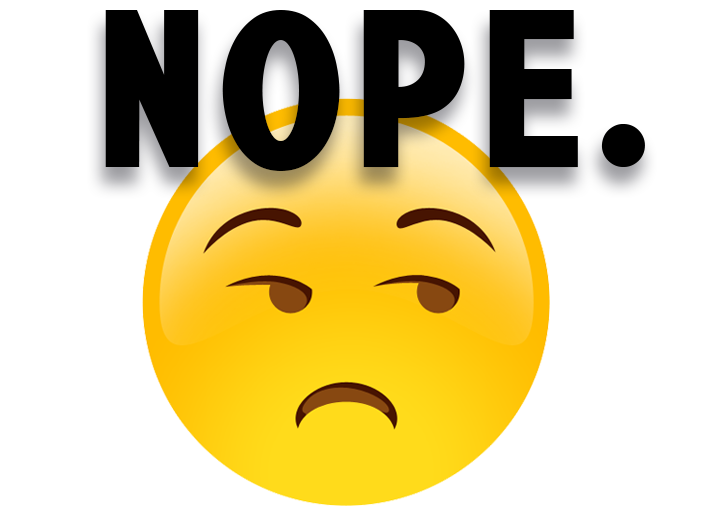
<style>
.page{position:relative;width:720px;height:512px;background:#ffffff}
.page>*{position:absolute;margin:0}
.t1{font:196.3px "WagnerZip-Change";letter-spacing:0.025em;color:#000000}
</style>
<div class="page">
<p class="t1" style="left:105px;top:10px;width:540px;height:161px">NOPE.</p>
</div>
